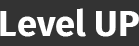
<style>
.page{position:relative;width:139px;height:46px;background:#333333}
.page>*{position:absolute;margin:0}
.t1{font:36px "FiraSans-Bold";color:#ffffff}
</style>
<div class="page">
<p class="t1" style="left:0px;top:8px;width:139px;height:29px">Level UP</p>
</div>
